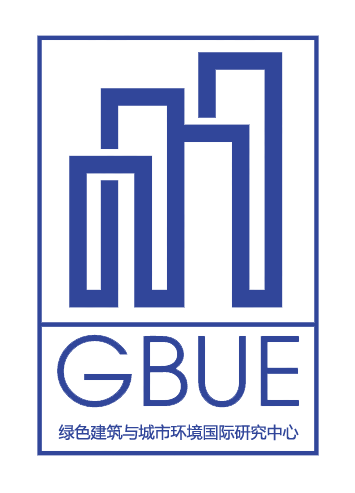
<style>
.page{position:relative;width:355px;height:493px;background:#ffffff}
.page>*{position:absolute;margin:0}
.t1{font:16px "MicrosoftYaHei";color:#31469a}
</style>
<div class="page">
<p class="t1" style="left:58px;top:424px;width:241px;height:17px">绿色建筑与城市环境国际研究中心</p>
</div>
